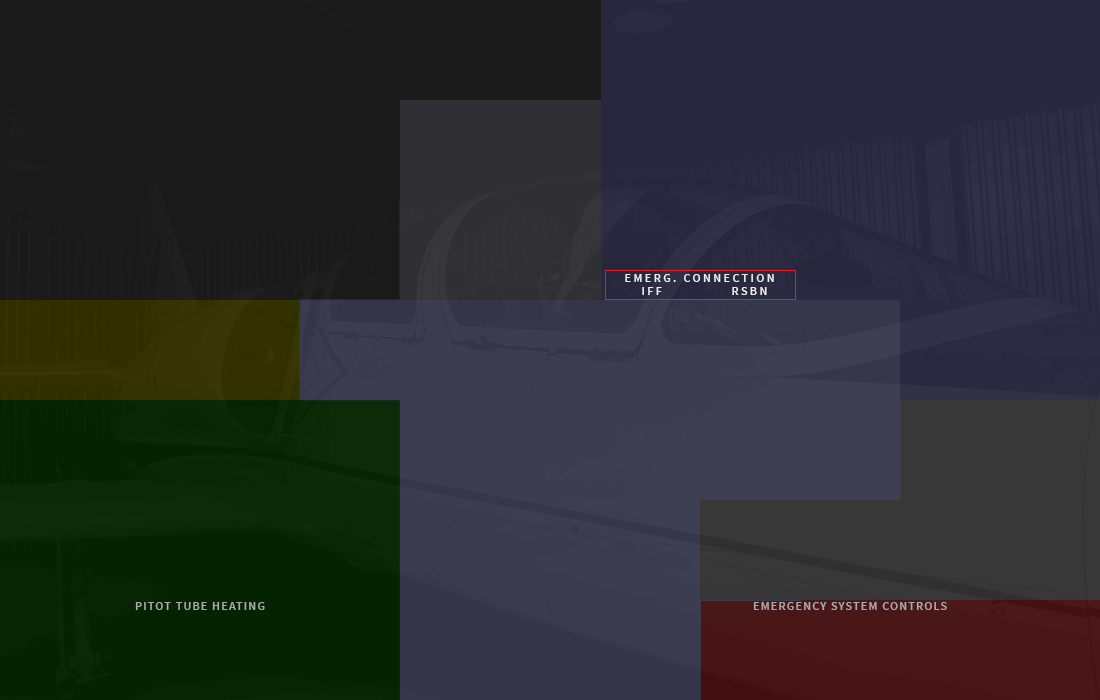
<style>
.page{position:relative;width:1100px;height:700px}
.page>*{position:absolute;margin:0}
.t1{font:12px/13px "SourceSansPro-SemiBold";letter-spacing:0.2em;color:#eeeeee}
.t2{font:12px "SourceSansPro-SemiBold";letter-spacing:0.1em;color:#aaaaaa}
</style>
<div class="page">
<p class="t1" style="left:625px;top:274px;width:149px;height:21px;text-align:center">EMERG. CONNECTION<br>  IFF              RSBN</p>
<p class="t2" style="left:135px;top:602px;width:130px;height:8px">PITOT TUBE HEATING</p>
<p class="t2" style="left:753px;top:602px;width:194px;height:8px">EMERGENCY SYSTEM CONTROLS</p>
</div>
